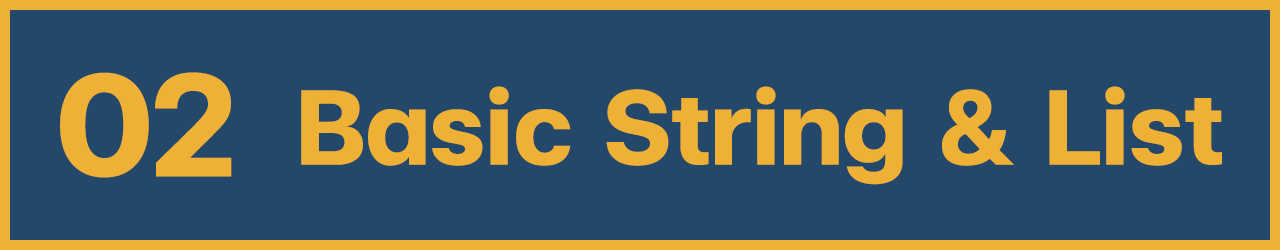
<style>
.page{position:relative;width:1280px;height:250px;background:#23486a}
.page>*{position:absolute;margin:0}
.t1{font:200px "FCMinimalBold";color:#efb036}
.t2{font:145px "FCMinimalBold";color:#efb036}
</style>
<div class="page">
<p class="t1" style="left:60px;top:72px;width:172px;height:106px">02</p>
<p class="t2" style="left:301px;top:86px;width:921px;height:99px">Basic String &amp; List</p>
</div>
